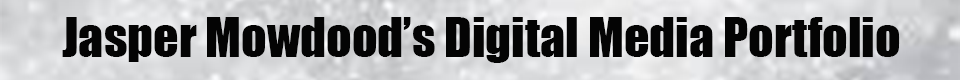
<style>
.page{position:relative;width:960px;height:80px;background:#040404}
.page>*{position:absolute;margin:0}
.t1{font:50px "Impact";color:#040404}
</style>
<div class="page">
<p class="t1" style="left:62px;top:17px;width:838px;height:46px">Jasper Mowdood’s Digital Media Portfolio</p>
</div>
